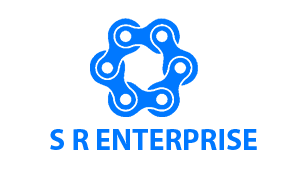
<style>
.page{position:relative;width:300px;height:170px;background:#ffffff}
.page>*{position:absolute;margin:0}
.t1{font:30px "MyriadPro-Bold";color:#0078ff}
</style>
<div class="page">
<p class="t1" style="left:50px;top:129px;width:207px;height:21px">S R ENTERPRISE</p>
</div>
